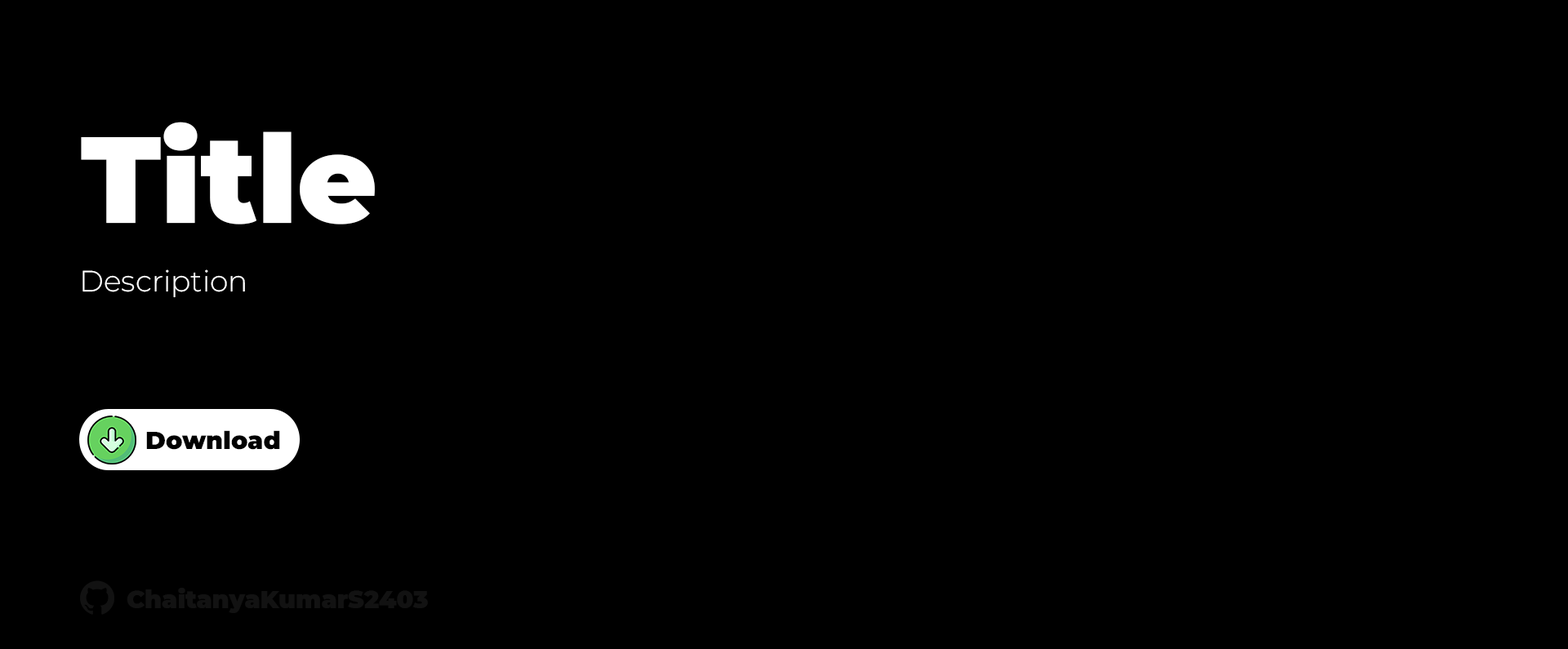
<style>
.page{position:relative;width:1568px;height:649px;background:#000000}
.page>*{position:absolute;margin:0}
.t1{font:122.5px "Montserrat-Black";color:#ffffff}
.t2{font:29.4px "Montserrat-Light";color:#ffffff}
.t3{font:24.5px "Montserrat-Black";color:#010101}
.t4{font:24.5px "Montserrat-Black";color:#121212}
</style>
<div class="page">
<p class="t1" style="left:81px;top:122px;width:294px;height:103px">Title</p>
<p class="t2" style="left:82px;top:270px;width:163px;height:28px">Description</p>
<p class="t3" style="left:146px;top:430px;width:134px;height:20px">Download</p>
<p class="t4" style="left:127px;top:588px;width:301px;height:25px">ChaitanyaKumarS2403</p>
</div>
